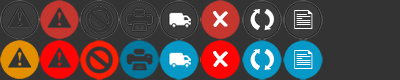
<style>
.page{position:relative;width:400px;height:80px;background:#333333}
.page>*{position:absolute;margin:0}
.t1{font:19.1px "LetterOMatic";letter-spacing:0.035em;color:#ffffff;scale:1.19 1}
</style>
<div class="page">
<p class="t1" style="left:213px;top:11px;width:15px;height:16px">x</p>
<p class="t1" style="left:213px;top:51px;width:15px;height:16px">x</p>
</div>
